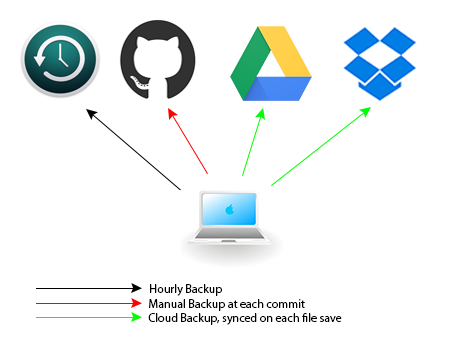
<style>
.page{position:relative;width:454px;height:340px;background:#ffffff}
.page>*{position:absolute;margin:0}
.t1{font:12px "MyriadPro-Regular";color:#000000}
</style>
<div class="page">
<p class="t1" style="left:150px;top:284px;width:72px;height:12px">Hourly Backup</p>
<p class="t1" style="left:149px;top:299px;width:156px;height:12px">Manual Backup at each commit</p>
<p class="t1" style="left:148px;top:313px;width:194px;height:12px">Cloud Backup, synced on each file save</p>
</div>
